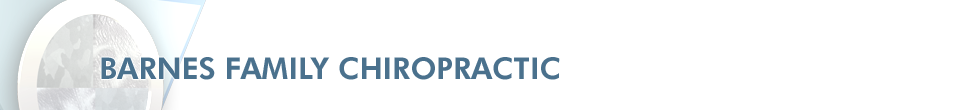
<style>
.page{position:relative;width:980px;height:110px;background:#ffffff}
.page>*{position:absolute;margin:0}
.t1{font:30px "FuturaBT-Heavy";color:#4a718d;text-transform:uppercase}
</style>
<div class="page">
<p class="t1" style="left:101px;top:57px;width:459px;height:23px">Barnes Family Chiropractic</p>
</div>
